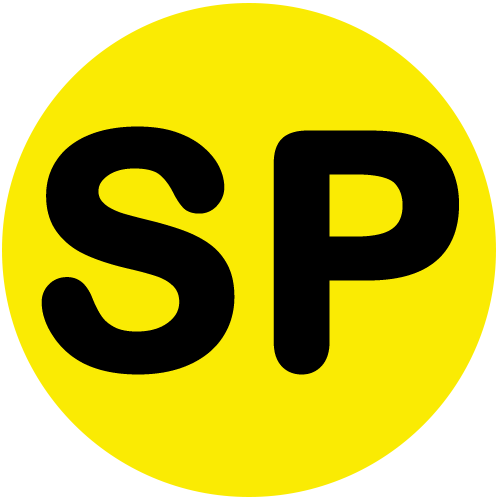
<style>
.page{position:relative;width:500px;height:500px;background:#faeb03}
.page>*{position:absolute;margin:0}
.t1{font:322.9px "ArialRoundedMTBold";color:#000000;font-weight:bold}
</style>
<div class="page">
<p class="t1" style="left:41px;top:126px;width:418px;height:249px">SP</p>
</div>
